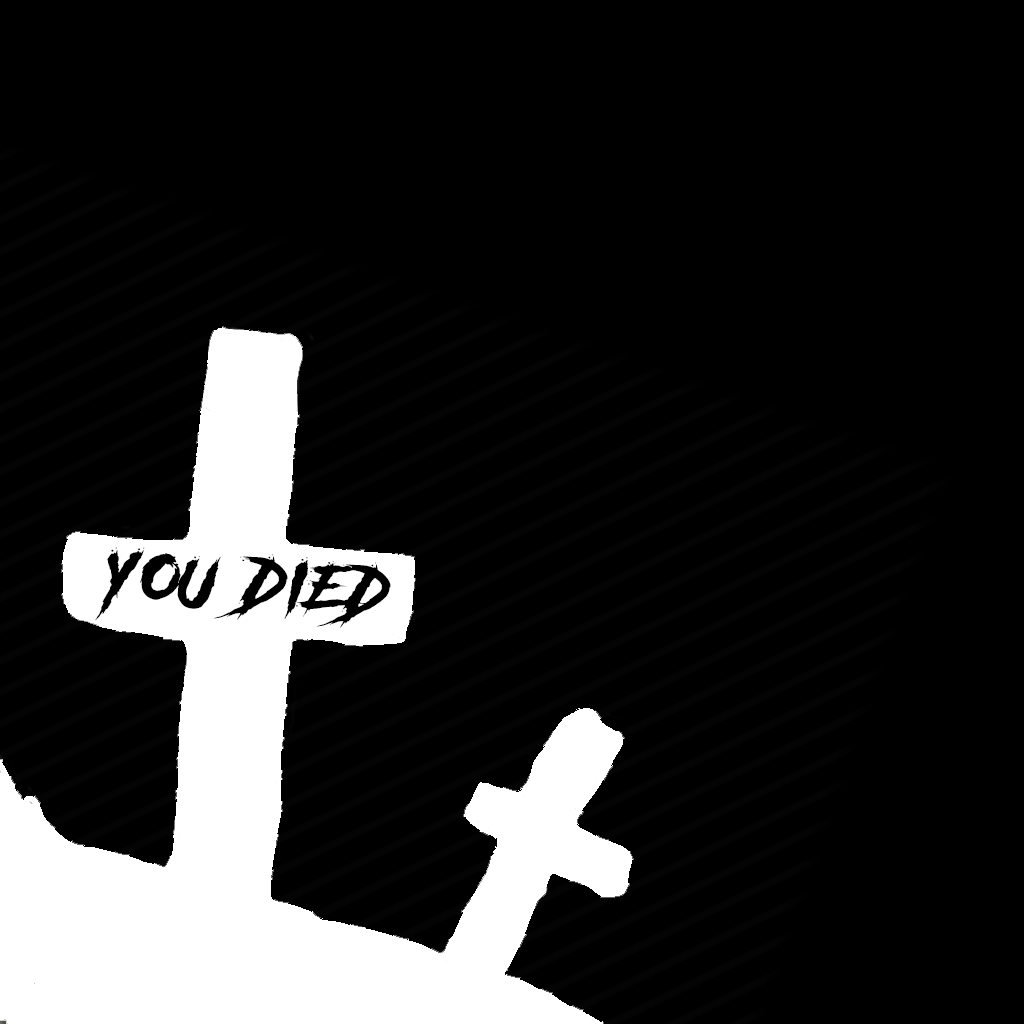
<style>
.page{position:relative;width:1024px;height:1024px;background:#000000}
.page>*{position:absolute;margin:0}
.t1{font:55px "AnotherDangerDemo";letter-spacing:0.1em;color:#000000;scale:1.18 1}
</style>
<div class="page">
<p class="t1" style="left:95px;top:547px;width:296px;height:81px;rotate:4deg">YOU DIED</p>
</div>
